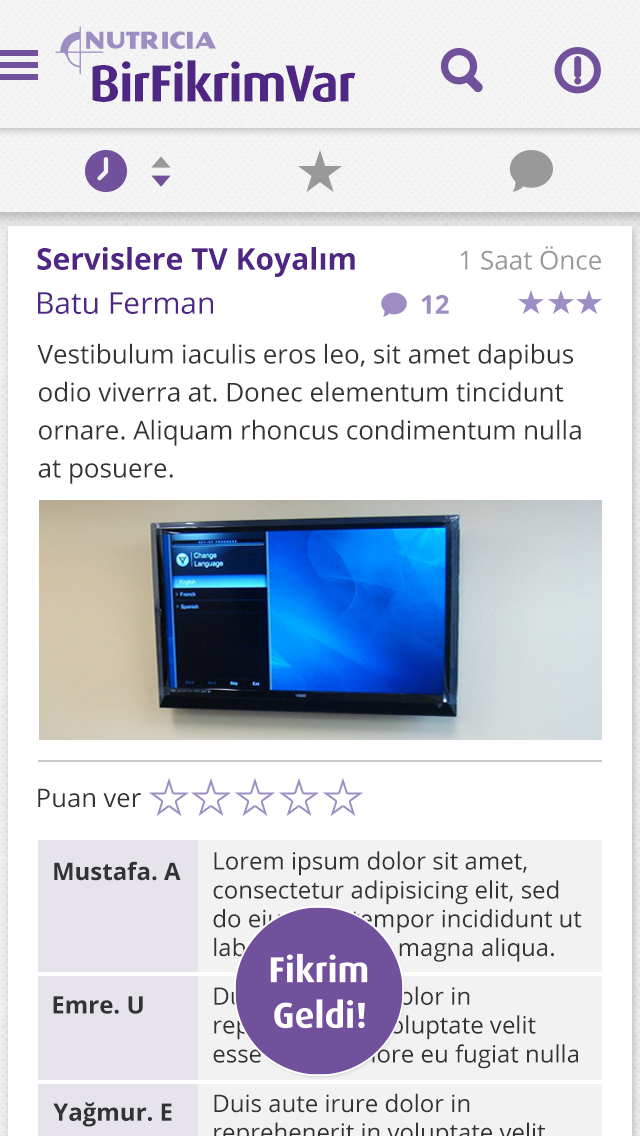
<style>
.page{position:relative;width:640px;height:1136px;background:#ffffff}
.page>*{position:absolute;margin:0}
.t1{font:52.5px "DaxPro-Bold";letter-spacing:-0.025em;color:#4f2683}
.t2{font:26px "OpenSans";color:#999999}
.t3{font:30px "OpenSans-Bold";color:#4f2683}
.t4{font:30px "OpenSans";color:#4f2683}
.t5{font:26px "OpenSans-Bold";color:#9c8dc3}
.t6{font:26px/38px "OpenSans";color:#313435}
.t7{font:25.6px "OpenSans";color:#313435}
.t8{font:24px "OpenSans";color:#313435}
.t9{font:24px "OpenSans-Bold";color:#313435}
.t10{font:24px "OpenSans"}
</style>
<div class="page">
<p class="t1" style="left:92px;top:60px;width:264px;height:42px">BirFikrimVar</p>
<p class="t2" style="left:460px;top:246px;width:141px;height:24px">1 Saat Önce</p>
<p class="t3" style="left:37px;top:247px;width:318px;height:30px">Servislere TV Koyalım</p>
<p class="t4" style="left:38px;top:292px;width:175px;height:22px">Batu Ferman</p>
<p class="t5" style="left:421px;top:295px;width:28px;height:19px">12</p>
<p class="t6" style="left:37px;top:343px;width:544px;height:141px">Vestibulum iaculis eros leo, sit amet dapibus odio viverra at. Donec elementum tincidunt ornare. Aliquam rhoncus condimentum nulla at posuere.</p>
<p class="t7" style="left:38px;top:788px;width:103px;height:20px">Puan ver</p>
<p class="t8" style="left:213px;top:851px;width:369px;height:111px">Lorem ipsum dolor sit amet, consectetur adipisicing elit, sed do eiusmod tempor incididunt ut labore et dolore magna aliqua.</p>
<p class="t9" style="left:54px;top:861px;width:127px;height:20px">Mustafa. A</p>
<p class="t10" style="left:213px;top:986px;width:365px;height:83px">Duis aute irure dolor in reprehende in voluptate velit esse cillum dolore eu fugiat nulla pariatur.</p>
<p class="t9" style="left:53px;top:996px;width:90px;height:18px">Emre. U</p>
<p class="t9" style="left:53px;top:1102px;width:119px;height:25px">Yağmur. E</p>
</div>
